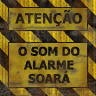
<style>
.page{position:relative;width:96px;height:96px}
.page>*{position:absolute;margin:0}
.t1{font:14px "Tahoma-Bold";color:#32251a}
.t2{font:12px/13.6px "Tahoma-Bold";color:#231c16}
</style>
<div class="page">
<p class="t1" style="left:15px;top:10px;width:67px;height:17px">ATENÇÃO</p>
<p class="t2" style="left:18px;top:46px;width:62px;height:38px;text-align:center">O SOM DO<br>ALARME<br>SOARÁ</p>
</div>
